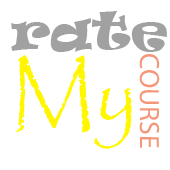
<style>
.page{position:relative;width:170px;height:170px;background:#ffffff}
.page>*{position:absolute;margin:0}
.t1{font:50px "Ravie";color:#a1a1a1}
.t2{font:28px "MyriadPro-Regular";color:#f69679}
.t3{font:83px "Papyrus-Regular";color:#fff600}
</style>
<div class="page">
<p class="t1" style="left:11px;top:11px;width:156px;height:41px">rate</p>
<p class="t2" style="left:139px;top:54px;width:21px;height:94px;rotate:90deg">COURSE</p>
<p class="t3" style="left:16px;top:55px;width:116px;height:94px">My</p>
</div>
